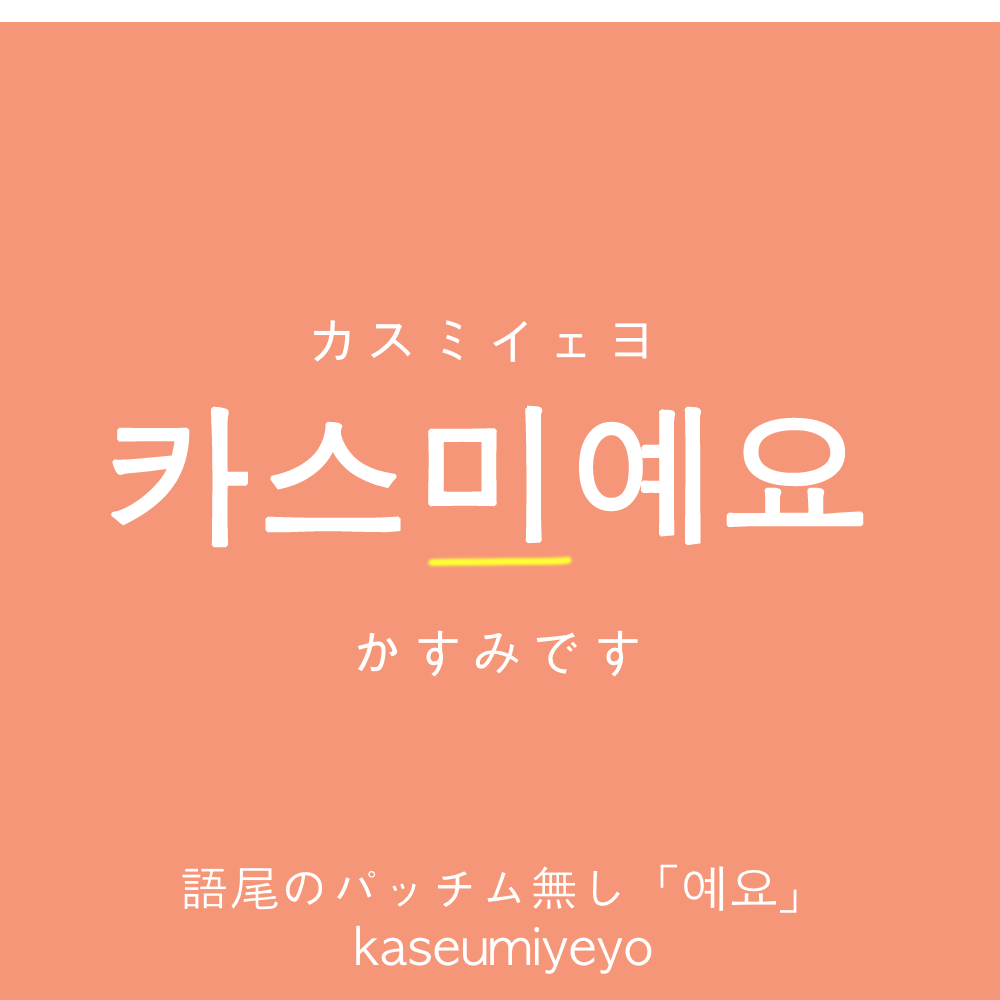
<style>
.page{position:relative;width:1000px;height:1000px;background:#f69679}
.page>*{position:absolute;margin:0}
.t1{font:60px "AppleGothic";color:#ffffff}
.t2{font:150px "AppleGothic";color:#ffffff;font-weight:bold}
.t3{font:50px "AppleGothic";color:#ffffff}
</style>
<div class="page">
<p class="t1" style="left:314px;top:320px;width:333px;height:42px">カスミイェヨ</p>
<p class="t2" style="left:111px;top:405px;width:753px;height:143px">카스미예요</p>
<p class="t1" style="left:358px;top:630px;width:280px;height:47px">かすみです</p>
<p class="t3" style="left:356px;top:925px;width:296px;height:49px">kaseumiyeyo</p>
</div>
